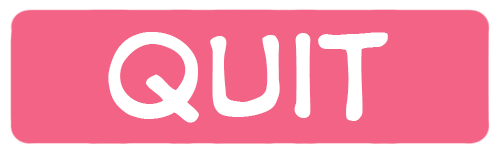
<style>
.page{position:relative;width:500px;height:150px;background:#f36385}
.page>*{position:absolute;margin:0}
.t1{font:100px "CCAstroCity";letter-spacing:0.025em;color:#ffffff}
</style>
<div class="page">
<p class="t1" style="left:108px;top:32px;width:280px;height:91px">Quit</p>
</div>
